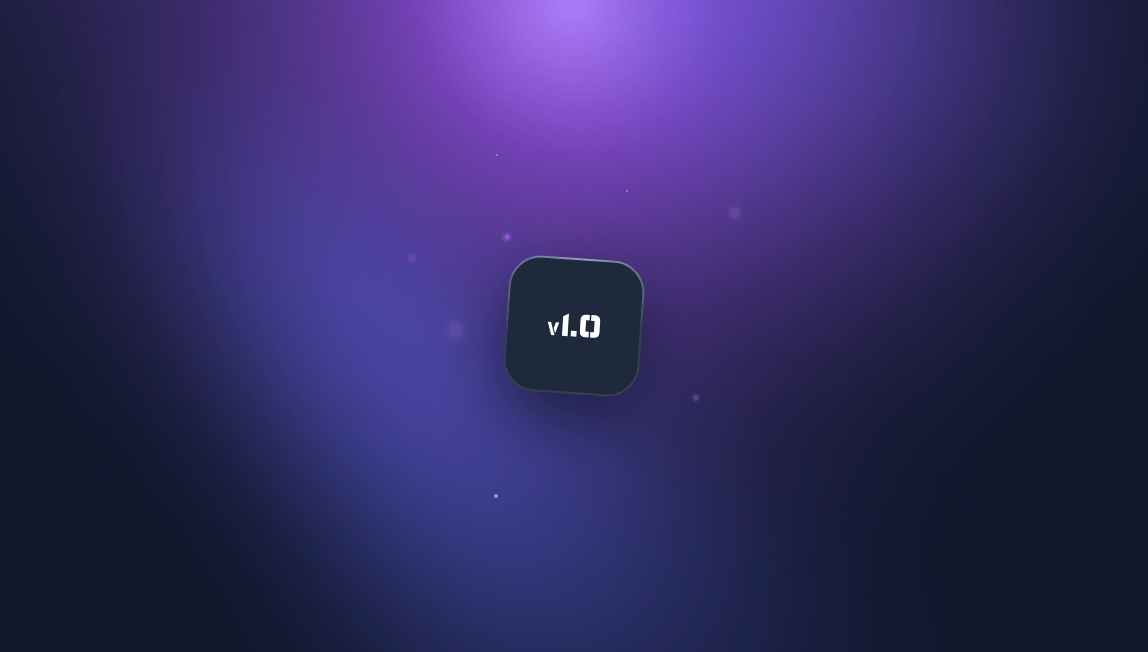
<style>
.page{position:relative;width:1148px;height:652px}
.page>*{position:absolute;margin:0}
.t1{font:36px "MajorSnafu";color:#ffffff}
.t2{font:21px "MajorSnafu";color:#ffffff}
</style>
<div class="page">
<p class="t1" style="left:547px;top:313px;width:54px;height:26px;rotate:4deg"><span class="t2">v</span>1.0</p>
</div>
